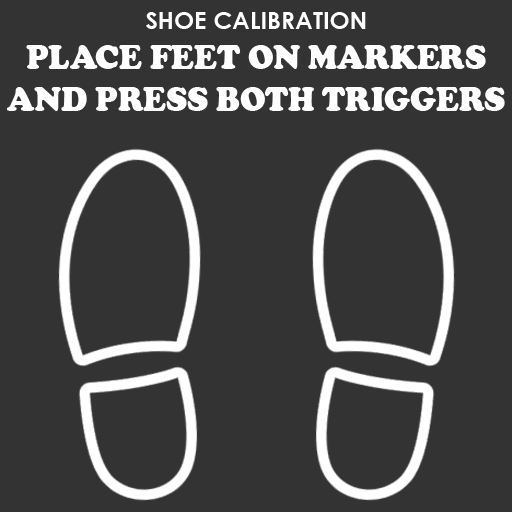
<style>
.page{position:relative;width:512px;height:512px;background:#333333}
.page>*{position:absolute;margin:0}
.t1{font:24px "CenturyGothic-Bold";color:#ffffff}
.t2{font:34.9px "CooperBlack";color:#ffffff;scale:0.94 1}
</style>
<div class="page">
<p class="t1" style="left:146px;top:12px;width:220px;height:17px">SHOE CALIBRATION</p>
<p class="t2" style="left:7px;top:45px;width:498px;height:66px;text-align:center">PLACE FEET ON MARKERS<br>AND PRESS BOTH TRIGGERS</p>
</div>
